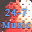
<style>
.page{position:relative;width:32px;height:32px}
.page>*{position:absolute;margin:0}
.t1{font:9px "ArialMT";letter-spacing:0.14em;color:#55aaff}
.t2{font:9px "Constantia";letter-spacing:0.14em;color:#55aaff}
</style>
<div class="page">
<p class="t1" style="left:5px;top:9px;width:22px;height:7px">24-7</p>
<p class="t2" style="left:2px;top:21px;width:29px;height:7px">Music</p>
</div>
